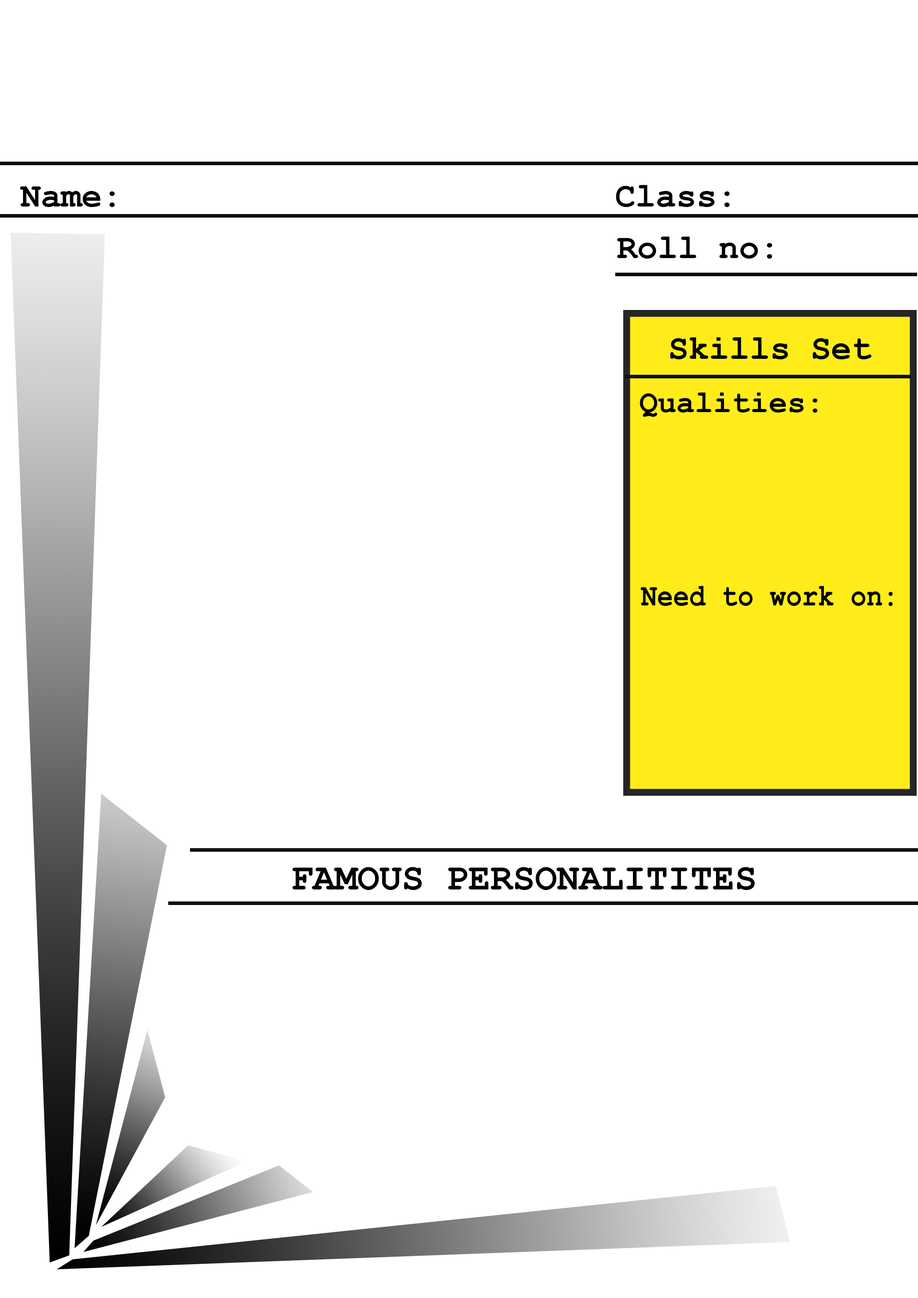
<style>
.page{position:relative;width:918px;height:1298px;background:#ffffff}
.page>*{position:absolute;margin:0}
.t1{font:33.9px "CourierNewPS-BoldMT";color:#000000}
.t2{font:30.8px "CourierNewPS-BoldMT";color:#000000}
.t3{font:30.8px "CourierNewPS-BoldMT";color:#000000;scale:0.87 1}
.t4{font:37px "CourierNewPS-BoldMT";color:#000000}
</style>
<div class="page">
<p class="t1" style="left:616px;top:185px;width:114px;height:22px">Class:</p>
<p class="t1" style="left:20px;top:186px;width:95px;height:21px">Name:</p>
<p class="t1" style="left:617px;top:236px;width:156px;height:23px">Roll no:</p>
<p class="t1" style="left:671px;top:337px;width:201px;height:23px">Skills Set</p>
<p class="t2" style="left:640px;top:393px;width:178px;height:24px">Qualities:</p>
<p class="t3" style="left:641px;top:586px;width:252px;height:20px">Need to work on:</p>
<p class="t4" style="left:293px;top:867px;width:462px;height:24px">FAMOUS PERSONALITITES</p>
</div>
